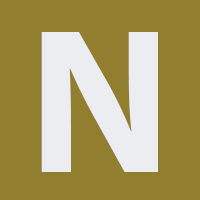
<style>
.page{position:relative;width:200px;height:200px;background:#917f2f}
.page>*{position:absolute;margin:0}
.t1{font:208.3px "MyriadPro-Bold";color:#ecedf1}
</style>
<div class="page">
<p class="t1" style="left:41px;top:32px;width:117px;height:140px">N</p>
</div>
